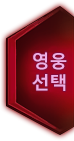
<style>
.page{position:relative;width:74px;height:141px}
.page>*{position:absolute;margin:0}
.t1{font:18px "MalgunGothicBold";color:#efafe4}
</style>
<div class="page">
<p class="t1" style="left:32px;top:52px;width:35px;height:39px;text-align:center">영웅<br>선택</p>
</div>
